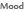
<style>
.page{position:relative;width:24px;height:12px;background:#ffffff}
.page>*{position:absolute;margin:0}
.t1{font:9px "AmiraParadiso";color:#646464}
</style>
<div class="page">
<p class="t1" style="left:0px;top:2px;width:24px;height:7px">Mood</p>
</div>
